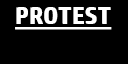
<style>
.page{position:relative;width:128px;height:64px;background:#000000}
.page>*{position:absolute;margin:0}
.t1{font:25.5px "HPSimplified-Bold";letter-spacing:-0.01em;color:#ffffff;text-decoration:underline}
</style>
<div class="page">
<p class="t1" style="left:15px;top:7px;width:97px;height:23px">PROTEST</p>
</div>
